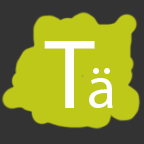
<style>
.page{position:relative;width:144px;height:144px;background:#bec818}
.page>*{position:absolute;margin:0}
.t1{font:100px "MyriadPro-Regular";color:#ffffff}
.t2{font:60px "MyriadPro-Regular";color:#ffffff}
</style>
<div class="page">
<p class="t1" style="left:44px;top:41px;width:51px;height:67px">T</p>
<p class="t2" style="left:89px;top:68px;width:24px;height:40px">ä</p>
</div>
